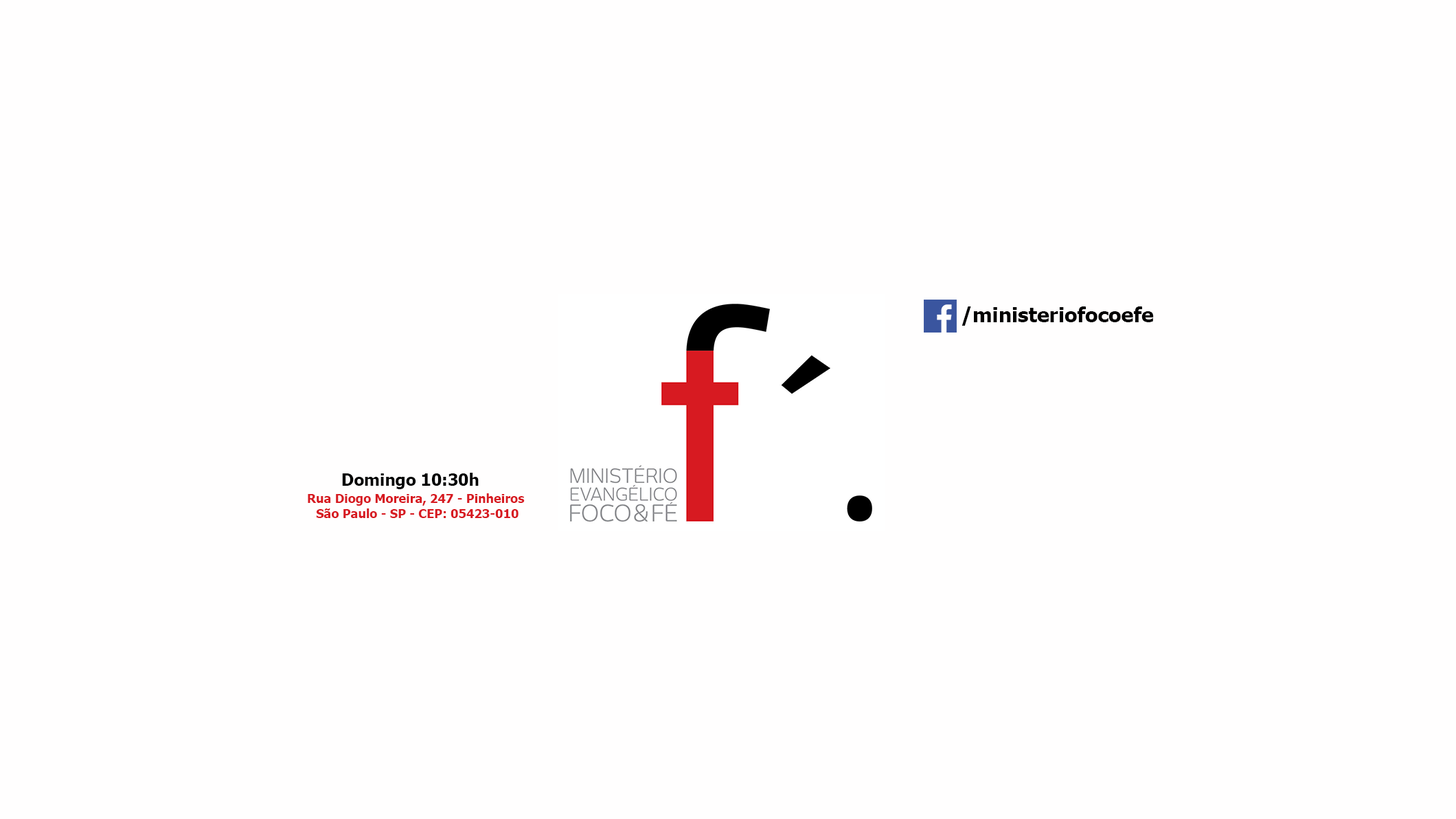
<style>
.page{position:relative;width:1456px;height:819px;background:#fffefe}
.page>*{position:absolute;margin:0}
.t1{font:20.6px "Tahoma-Bold";color:#000000}
.t2{font:16.5px "Tahoma-Bold";color:#000000}
.t3{font:12.4px "Tahoma-Bold";color:#d71a21}
</style>
<div class="page">
<p class="t1" style="left:962px;top:306px;width:192px;height:20px">/ministeriofocoefe</p>
<p class="t2" style="left:342px;top:473px;width:137px;height:16px">Domingo 10:30h</p>
<p class="t3" style="left:308px;top:493px;width:217px;height:25px;text-align:center">Rua Diogo Moreira, 247 - Pinheiros <br>São Paulo - SP - CEP: 05423-010</p>
</div>
